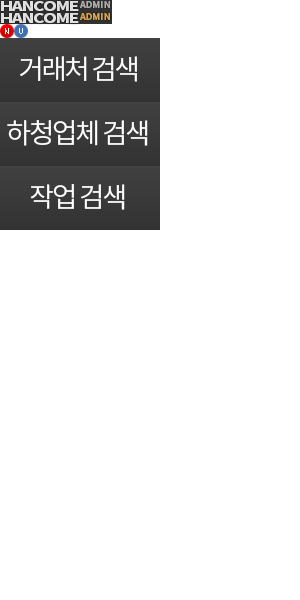
<style>
.page{position:relative;width:300px;height:600px;background:#ffffff}
.page>*{position:absolute;margin:0}
.t1{font:13px "NotoSansCJKkr-Black";letter-spacing:-0.08em;color:#e0e0e0;scale:1.3 1}
.t2{font:9px "NotoSansCJKkr-Bold";letter-spacing:0.02em;color:#adadad}
.t3{font:9px "NotoSansCJKkr-Bold";letter-spacing:0.02em;color:#d7a44c}
.t4{font:27.5px "NotoSansCJKkr-DemiLight";letter-spacing:-0.08em;color:#ffffff}
</style>
<div class="page">
<p class="t1" style="left:1px;top:1px;width:78px;height:10px">HANCOME</p>
<p class="t2" style="left:80px;top:1px;width:30px;height:7px">ADMIN</p>
<p class="t1" style="left:1px;top:13px;width:78px;height:10px">HANCOME</p>
<p class="t3" style="left:80px;top:13px;width:30px;height:7px">ADMIN</p>
<p class="t4" style="left:20px;top:56px;width:117px;height:26px">거래처 검색</p>
<p class="t4" style="left:7px;top:120px;width:141px;height:26px">하청업체 검색</p>
<p class="t4" style="left:30px;top:184px;width:95px;height:26px">작업 검색</p>
</div>
